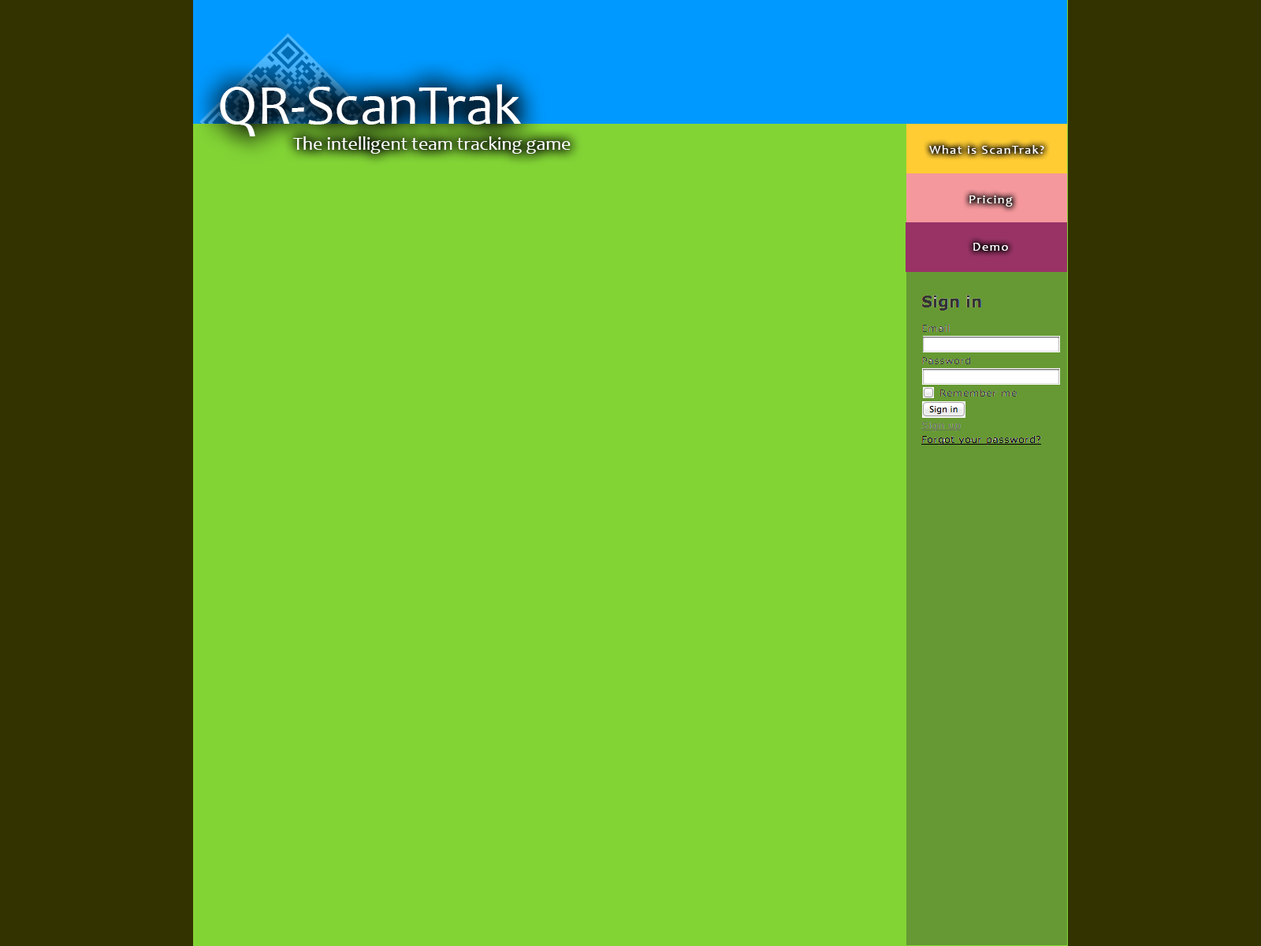
<style>
.page{position:relative;width:1261px;height:946px;background:#82d435}
.page>*{position:absolute;margin:0}
.t1{font:56.7px "Candara";color:#ffffff}
.t2{font:18.9px "Candara";color:#ffffff}
.t3{font:12.6px "Candara";letter-spacing:0.1em;color:#ffffff}
</style>
<div class="page">
<p class="t1" style="left:220px;top:84px;width:301px;height:52px">QR-ScanTrak</p>
<p class="t2" style="left:293px;top:136px;width:278px;height:18px">The intelligent team tracking game</p>
<p class="t3" style="left:929px;top:145px;width:115px;height:9px">What is ScanTrak?</p>
<p class="t3" style="left:969px;top:195px;width:44px;height:11px">Pricing</p>
<p class="t3" style="left:973px;top:243px;width:35px;height:8px">Demo</p>
</div>
